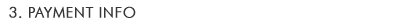
<style>
.page{position:relative;width:400px;height:24px;background:#ffffff}
.page>*{position:absolute;margin:0}
.t1{font:14.7px "FuturaBT-Light";letter-spacing:0.025em;color:#363636;text-transform:uppercase;font-weight:bold}
</style>
<div class="page">
<p class="t1" style="left:9px;top:6px;width:127px;height:12px">3. payment INFO</p>
</div>
